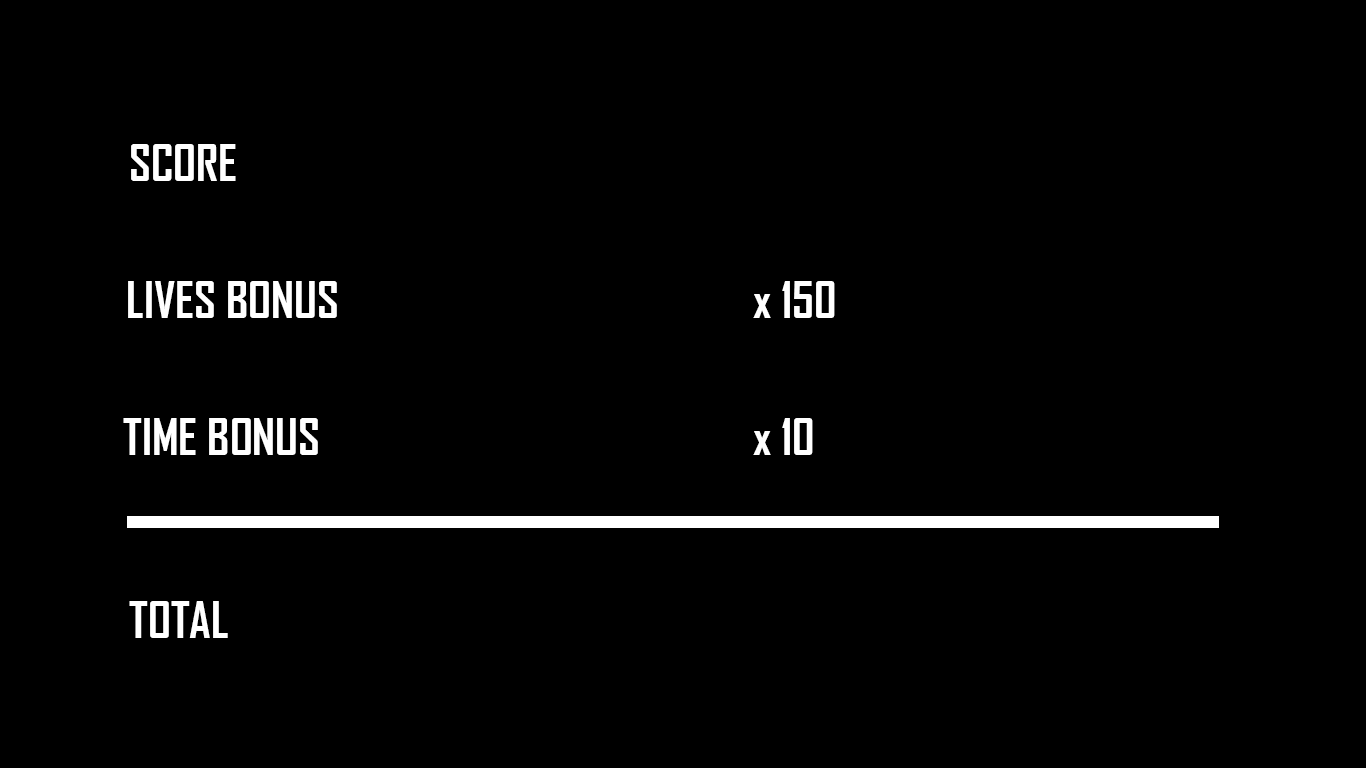
<style>
.page{position:relative;width:1366px;height:768px;background:#000000}
.page>*{position:absolute;margin:0}
.t1{font:48px "AgencyFB-Bold";color:#ffffff}
</style>
<div class="page">
<p class="t1" style="left:131px;top:144px;width:105px;height:37px">SCORE</p>
<p class="t1" style="left:128px;top:281px;width:209px;height:37px">LIVES BONUS</p>
<p class="t1" style="left:753px;top:281px;width:82px;height:37px">x 150</p>
<p class="t1" style="left:123px;top:418px;width:195px;height:37px">TIME BONUS</p>
<p class="t1" style="left:753px;top:418px;width:60px;height:37px">x 10</p>
<p class="t1" style="left:129px;top:601px;width:99px;height:37px">TOTAL</p>
</div>
